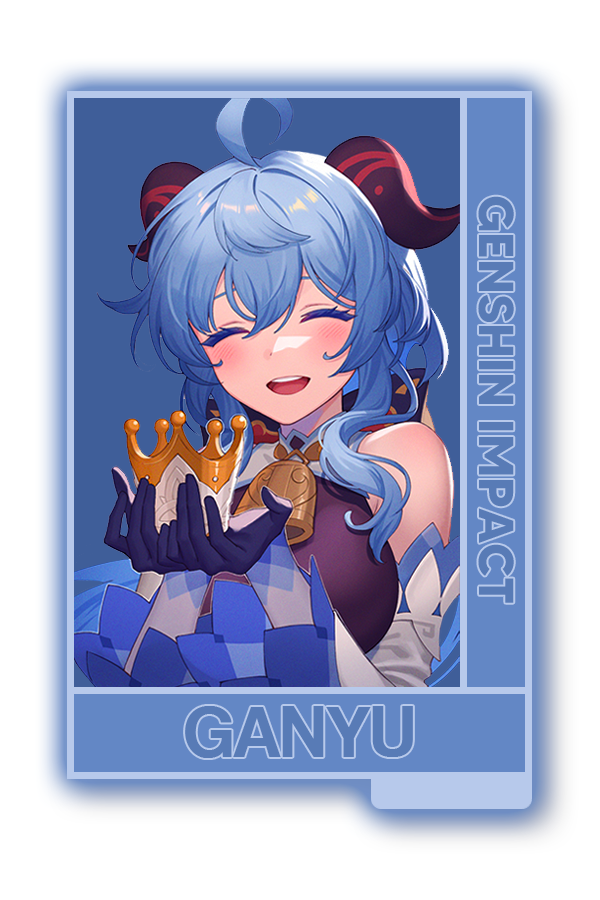
<style>
.page{position:relative;width:600px;height:900px;background:#ffffff}
.page>*{position:absolute;margin:0}
.t1{font:48.8px "MADETOMMY-Bold";color:#587bb6}
.t2{font:75px "CoolveticaRg-Regular";color:#587bb6}
</style>
<div class="page">
<p class="t1" style="left:478px;top:196px;width:36px;height:407px;rotate:90deg">GENSHIN IMPACT</p>
<p class="t2" style="left:185px;top:706px;width:228px;height:52px">GANYU</p>
</div>
